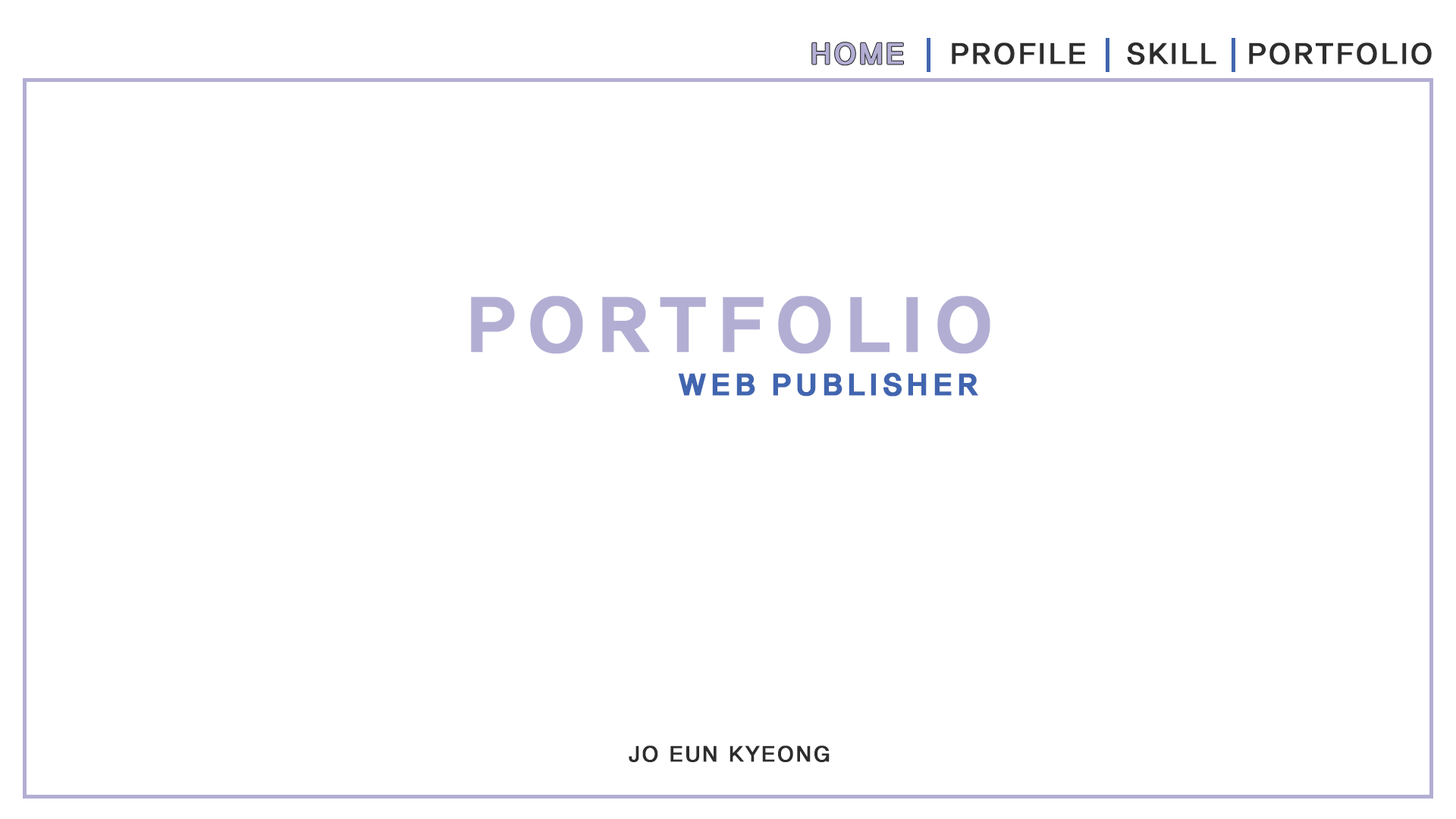
<style>
.page{position:relative;width:1456px;height:819px;background:#ffffff}
.page>*{position:absolute;margin:0}
.t1{font:30.3px "HaanYGodic23";color:#2d2d2d;font-weight:bold}
.t2{font:75.8px "HaanYGodic25";color:#b2aed3;font-weight:bold}
.t3{font:30.3px "HaanYGodic25";color:#4165af;font-weight:bold}
.t4{font:22.7px "HaanYGodic23";color:#2d2d2d;font-weight:bold}
</style>
<div class="page">
<p class="t1" style="left:952px;top:42px;width:133px;height:23px">PROFILE</p>
<p class="t1" style="left:1127px;top:42px;width:89px;height:23px">SKILL</p>
<p class="t1" style="left:1249px;top:42px;width:183px;height:23px">PORTFOLIO</p>
<p class="t2" style="left:471px;top:296px;width:519px;height:58px">PORTFOLIO</p>
<p class="t3" style="left:678px;top:372px;width:300px;height:25px">WEB PUBLISHER</p>
<p class="t4" style="left:629px;top:745px;width:201px;height:17px">JO EUN KYEONG</p>
</div>
